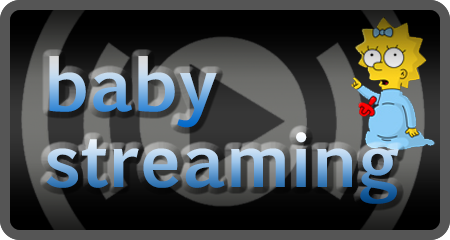
<style>
.page{position:relative;width:450px;height:240px}
.page>*{position:absolute;margin:0}
.t1{font:72px "EuphemiaUCAS-Bold"}
</style>
<div class="page">
<p class="t1" style="left:49px;top:56px;width:168px;height:72px">baby</p>
<p class="t1" style="left:46px;top:132px;width:353px;height:72px">streaming</p>
</div>
